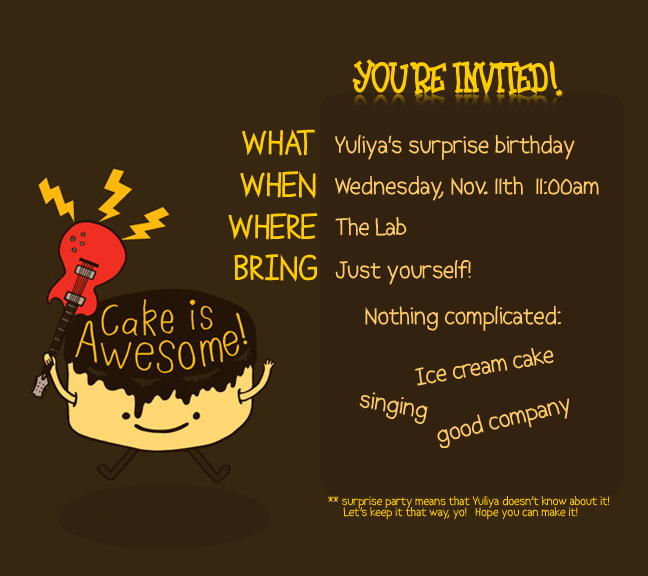
<style>
.page{position:relative;width:648px;height:576px;background:#372710}
.page>*{position:absolute;margin:0}
.t1{font:36px "Frosty";color:#ffcc00}
.t2{font:36px/75px "Abscissa";color:#ffcc00}
.t3{font:36px/75px "Frosty";color:#ffcc00}
.t4{font:24px "Abscissa";color:#ffcc66}
.t5{font:12px "Abscissa";color:#ffcc00}
</style>
<div class="page">
<p class="t1" style="left:352px;top:59px;width:211px;height:37px">YOU'RE INVITED!</p>
<p class="t2" style="left:242px;top:129px;width:73px;height:27px;text-align:center">WHAT<br><span class="t3">T</span></p>
<p class="t4" style="left:335px;top:135px;width:240px;height:25px">Yuliya's surprise birthday</p>
<p class="t2" style="left:240px;top:171px;width:76px;height:28px;text-align:center">WHEN<br><span class="t3">T</span></p>
<p class="t4" style="left:335px;top:176px;width:264px;height:25px">Wednesday, Nov. 11th  11:00am</p>
<p class="t2" style="left:228px;top:213px;width:90px;height:27px;text-align:center">WHERE<br><span class="t3">T</span></p>
<p class="t4" style="left:335px;top:217px;width:72px;height:19px">The Lab</p>
<p class="t2" style="left:234px;top:254px;width:83px;height:28px;text-align:center">BRING<br><span class="t3">T</span></p>
<p class="t4" style="left:335px;top:260px;width:136px;height:25px">Just yourself!</p>
<p class="t4" style="left:365px;top:306px;width:196px;height:25px">Nothing complicated:</p>
<p class="t4" style="left:415px;top:348px;width:139px;height:38px;rotate:-10deg">Ice cream cake</p>
<p class="t4" style="left:359px;top:392px;width:69px;height:32px;rotate:10deg">singing</p>
<p class="t4" style="left:437px;top:398px;width:132px;height:50px;rotate:-14deg">good company</p>
<p class="t5" style="left:328px;top:496px;width:281px;height:13px">** surprise party means that Yuliya doesn’t know about it!</p>
<p class="t5" style="left:343px;top:507px;width:235px;height:13px">Let’s keep it that way, yo!   Hope you can make it!</p>
</div>
